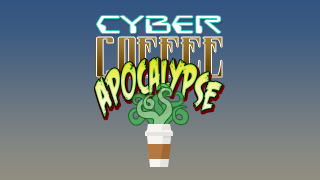
<style>
.page{position:relative;width:320px;height:180px}
.page>*{position:absolute;margin:0}
.t1{font:24.8px "DestructoBeamBB";color:#ffffff;scale:1.66 1}
.t2{font:40.8px "FeastofFleshBB";scale:0.56 1}
</style>
<div class="page">
<p class="t1" style="left:96px;top:15px;width:125px;height:18px">CYBER</p>
<p class="t2" style="left:94px;top:57px;width:128px;height:60px">APOCALYPSE</p>
</div>
